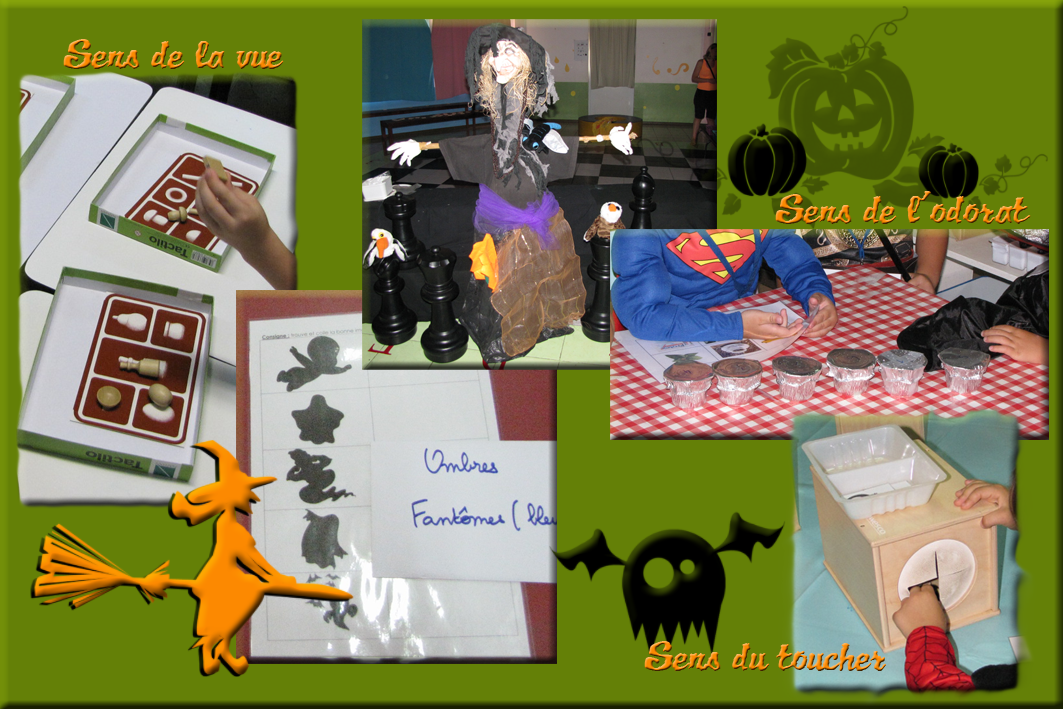
<style>
.page{position:relative;width:1063px;height:709px;background:#648007}
.page>*{position:absolute;margin:0}
.t1{font:45px "JackLanternBB"}
</style>
<div class="page">
<p class="t1" style="left:63px;top:39px;width:221px;height:30px">Sens de la vue</p>
<p class="t1" style="left:775px;top:191px;width:256px;height:33px">Sens de l’odorat</p>
<p class="t1" style="left:644px;top:641px;width:242px;height:30px">Sens du toucher</p>
</div>
